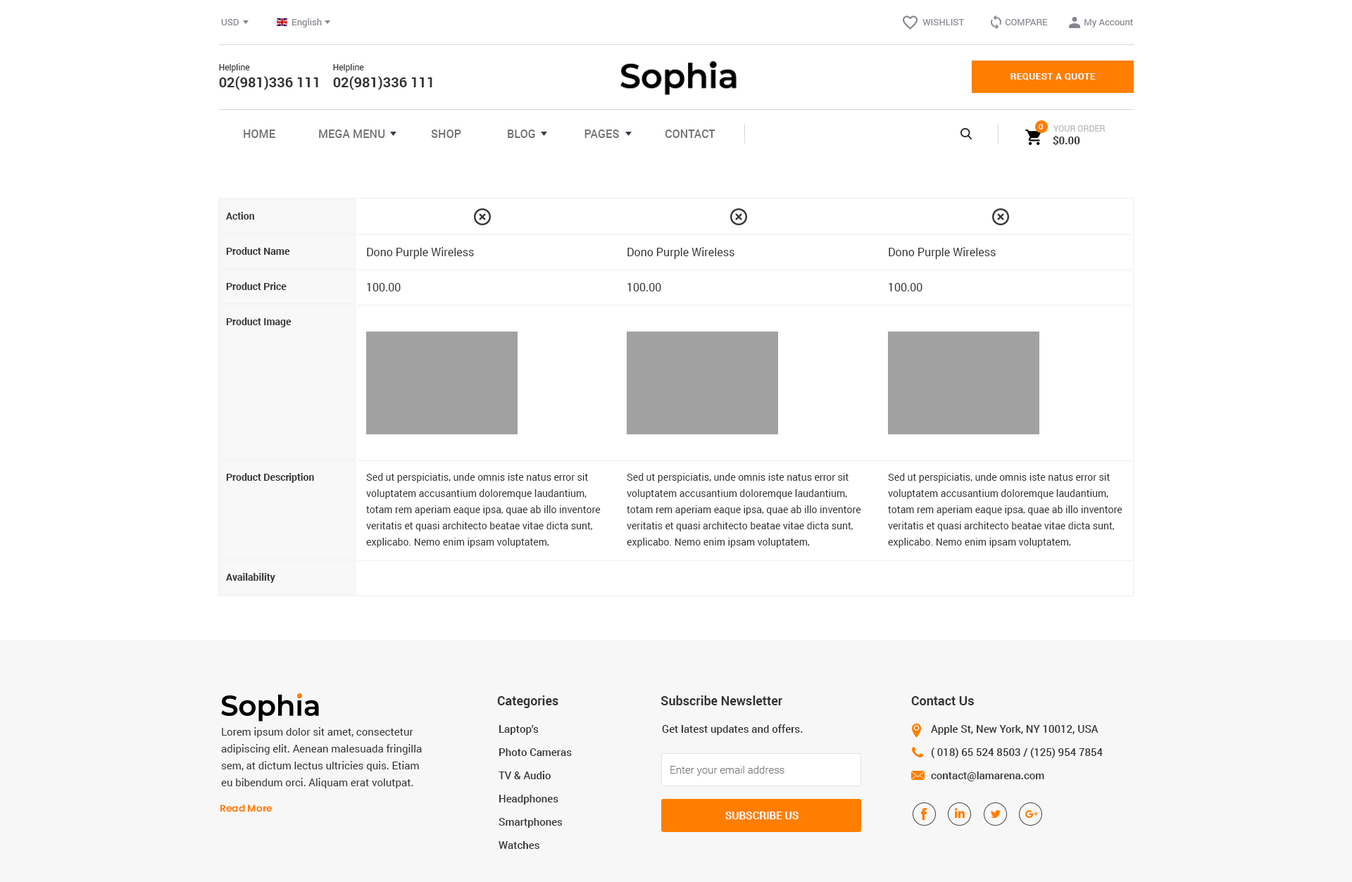
<style>
.page{position:relative;width:1352px;height:882px;background:#ffffff}
.page>*{position:absolute;margin:0}
.t1{font:9.2px "Roboto-Regular";color:#81858c}
.t2{font:14.1px "Roboto-Bold";color:#333333}
.t3{font:8.4px "Roboto-Regular";color:#333333}
.t4{font:9.2px "Roboto-Bold";letter-spacing:0.04em;color:#ffffff}
.t5{font:7.7px "Roboto-Regular";color:#ffffff}
.t6{font:8.4px "Roboto-Regular";color:#b8b7b7}
.t7{font:11.3px "Roboto-Medium";color:#737373}
.t8{font:10.6px "Roboto-Bold";color:#333333}
.t9{font:9.9px "Roboto-Bold";color:#333333}
.t10{font:11.3px "Roboto-Regular";color:#333333}
.t11{font:9.9px/16.2px "Roboto-Regular";color:#333333}
.t12{font:12.7px "Roboto-Bold";color:#333333}
.t13{font:10.6px/23.2px "Roboto-Medium";color:#333333}
.t14{font:10.6px "Roboto-Medium";color:#333333}
.t15{font:10.6px/16.9px "Roboto-Regular";color:#333333}
.t16{font:10.6px "Roboto-Light";color:#777777}
.t17{font:9.6px "Poppins-SemiBold";color:#ff7e00}
.t18{font:10.6px "Roboto-Bold";color:#ffffff}
</style>
<div class="page">
<p class="t1" style="left:221px;top:19px;width:18px;height:6px">USD</p>
<p class="t1" style="left:292px;top:18px;width:30px;height:9px">English</p>
<p class="t1" style="left:922px;top:19px;width:211px;height:8px">WISHLIST                  COMPARE                My Account</p>
<p class="t2" style="left:219px;top:63px;width:99px;height:27px"><span class="t3">Helpline<br></span>02(981)336 111</p>
<p class="t2" style="left:333px;top:63px;width:99px;height:27px"><span class="t3">Helpline<br></span>02(981)336 111</p>
<p class="t4" style="left:1010px;top:73px;width:85px;height:7px">REQUEST A QUOTE</p>
<p class="t5" style="left:1038px;top:124px;width:5px;height:6px">0</p>
<p class="t6" style="left:1053px;top:125px;width:52px;height:7px">YOUR ORDER</p>
<p class="t7" style="left:244px;top:130px;width:471px;height:8px">HOME               MEGA MENU                SHOP                BLOG                 PAGES                CONTACT</p>
<p class="t8" style="left:1053px;top:135px;width:27px;height:11px">$0.00</p>
<p class="t9" style="left:226px;top:212px;width:28px;height:8px">Action</p>
<p class="t9" style="left:226px;top:247px;width:64px;height:8px">Product Name</p>
<p class="t10" style="left:367px;top:247px;width:107px;height:12px">Dono Purple Wireless</p>
<p class="t10" style="left:627px;top:247px;width:107px;height:12px">Dono Purple Wireless</p>
<p class="t10" style="left:888px;top:247px;width:107px;height:12px">Dono Purple Wireless</p>
<p class="t9" style="left:226px;top:282px;width:61px;height:8px">Product Price</p>
<p class="t10" style="left:367px;top:283px;width:34px;height:8px">100.00</p>
<p class="t10" style="left:627px;top:283px;width:34px;height:8px">100.00</p>
<p class="t10" style="left:888px;top:283px;width:34px;height:8px">100.00</p>
<p class="t9" style="left:226px;top:318px;width:65px;height:9px">Product Image</p>
<p class="t9" style="left:226px;top:473px;width:88px;height:10px">Product Description</p>
<p class="t11" style="left:366px;top:473px;width:235px;height:75px">Sed ut perspiciatis, unde omnis iste natus error sit voluptatem accusantium doloremque laudantium, totam rem aperiam eaque ipsa, quae ab illo inventore veritatis et quasi architecto beatae vitae dicta sunt, explicabo. Nemo enim ipsam voluptatem,</p>
<p class="t11" style="left:627px;top:473px;width:234px;height:75px">Sed ut perspiciatis, unde omnis iste natus error sit voluptatem accusantium doloremque laudantium, totam rem aperiam eaque ipsa, quae ab illo inventore veritatis et quasi architecto beatae vitae dicta sunt, explicabo. Nemo enim ipsam voluptatem,</p>
<p class="t11" style="left:888px;top:473px;width:234px;height:75px">Sed ut perspiciatis, unde omnis iste natus error sit voluptatem accusantium doloremque laudantium, totam rem aperiam eaque ipsa, quae ab illo inventore veritatis et quasi architecto beatae vitae dicta sunt, explicabo. Nemo enim ipsam voluptatem,</p>
<p class="t9" style="left:226px;top:573px;width:49px;height:10px">Availability</p>
<p class="t12" style="left:497px;top:696px;width:61px;height:12px">Categories</p>
<p class="t12" style="left:660px;top:696px;width:122px;height:9px">Subscribe Newsletter</p>
<p class="t12" style="left:911px;top:696px;width:63px;height:9px">Contact Us</p>
<p class="t13" style="left:498px;top:725px;width:74px;height:124px">Laptop’s<br>Photo Cameras<br>TV &amp; Audio<br>Headphones<br>Smartphones<br>Watches</p>
<p class="t14" style="left:662px;top:724px;width:141px;height:11px">Get latest updates and offers.</p>
<p class="t13" style="left:931px;top:725px;width:172px;height:56px">Apple St, New York, NY 10012, USA<br>( 018) 65 524 8503 / (125) 954 7854<br>contact@lamarena.com</p>
<p class="t15" style="left:221px;top:727px;width:201px;height:62px">Lorem ipsum dolor sit amet, consectetur adipiscing elit. Aenean malesuada fringilla sem, at dictum lectus ultricies quis. Etiam eu bibendum orci. Aliquam erat volutpat.</p>
<p class="t16" style="left:670px;top:766px;width:114px;height:10px">Enter your email address</p>
<p class="t17" style="left:220px;top:804px;width:52px;height:8px">Read More</p>
<p class="t18" style="left:725px;top:812px;width:73px;height:7px">SUBSCRIBE US</p>
</div>
